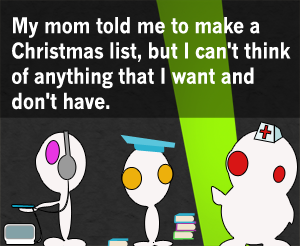
<style>
.page{position:relative;width:300px;height:246px}
.page>*{position:absolute;margin:0}
.t1{font:21px "NewsGothic-Bold";letter-spacing:-0.005em;color:#ffffff;scale:0.92 1}
</style>
<div class="page">
<p class="t1" style="left:12px;top:17px;width:279px;height:93px">My mom told me to make a <br>Christmas list, but I can't think <br>of anything that I want and <br>don't have.</p>
</div>
